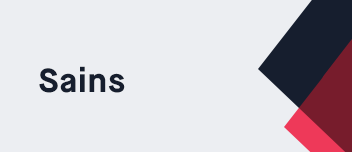
<style>
.page{position:relative;width:352px;height:152px;background:#eceef2}
.page>*{position:absolute;margin:0}
.t1{font:33.3px "MaisonNeue-Bold";letter-spacing:0.04em;color:#161e2e}
</style>
<div class="page">
<p class="t1" style="left:39px;top:66px;width:86px;height:27px">Sains</p>
</div>
